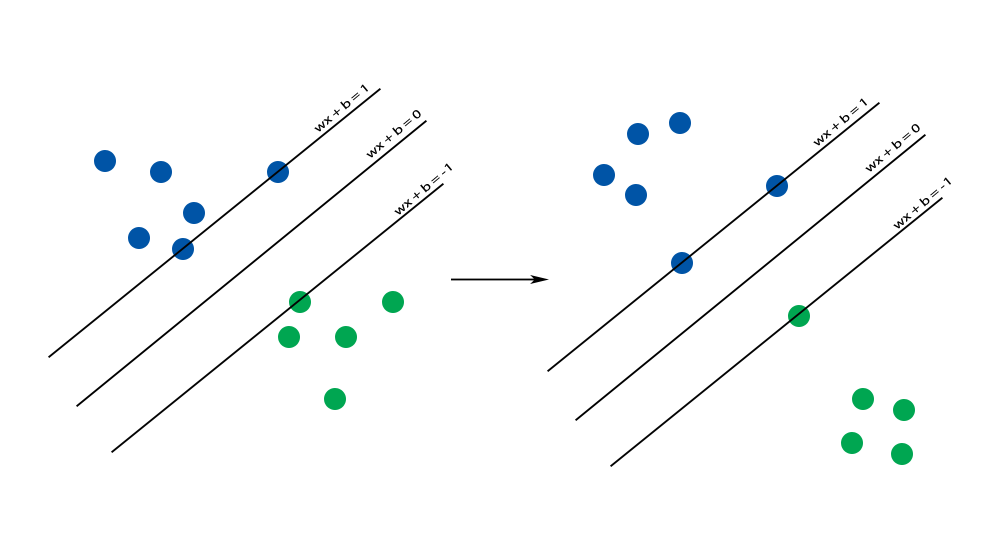
<style>
.page{position:relative;width:1000px;height:550px;background:#ffffff}
.page>*{position:absolute;margin:0}
.t1{font:12.3px "MyriadPro-Regular";color:#030303;scale:1.3 1}
</style>
<div class="page">
<p class="t1" style="left:314px;top:84px;width:54px;height:48px;rotate:-40deg">wx + b = 1</p>
<p class="t1" style="left:813px;top:98px;width:54px;height:48px;rotate:-40deg">wx + b = 1</p>
<p class="t1" style="left:366px;top:110px;width:55px;height:48px;rotate:-40deg">wx + b = 0</p>
<p class="t1" style="left:865px;top:124px;width:55px;height:48px;rotate:-40deg">wx + b = 0</p>
<p class="t1" style="left:394px;top:163px;width:58px;height:52px;rotate:-40deg">wx + b = -1</p>
<p class="t1" style="left:893px;top:177px;width:58px;height:52px;rotate:-40deg">wx + b = -1</p>
</div>
